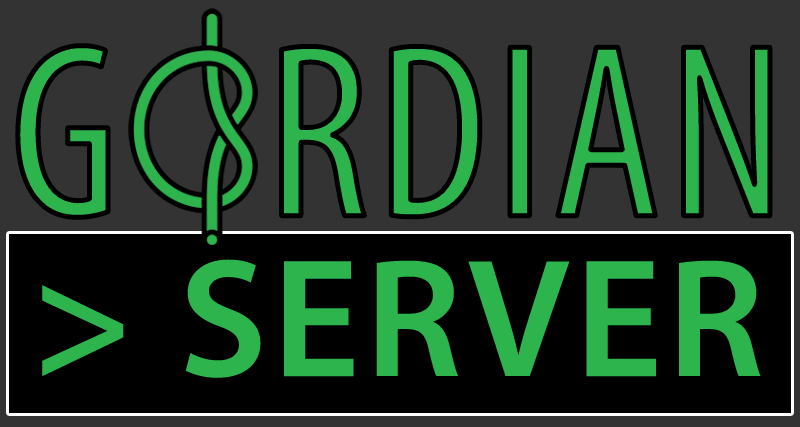
<style>
.page{position:relative;width:800px;height:427px;background:#333333}
.page>*{position:absolute;margin:0}
.t1{font:250px "MyriadPro-Cond";letter-spacing:0.03em;color:#2db44c}
.t2{font:170px "MyriadPro-Semibold";letter-spacing:0.03em;color:#2db44c}
</style>
<div class="page">
<p class="t1" style="left:17px;top:45px;width:753px;height:173px">G   RDIAN</p>
<p class="t2" style="left:42px;top:259px;width:719px;height:119px">&gt; SERVER</p>
</div>
